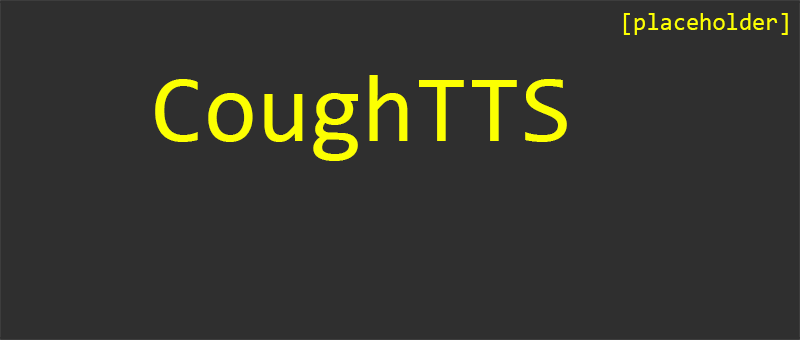
<style>
.page{position:relative;width:800px;height:340px;background:#2f2f2f}
.page>*{position:absolute;margin:0}
.t1{font:24px "Consolas";color:#fcff01}
.t2{font:96px "Consolas";color:#fcff01}
</style>
<div class="page">
<p class="t1" style="left:623px;top:13px;width:165px;height:22px">[placeholder]</p>
<p class="t2" style="left:155px;top:75px;width:412px;height:86px">CoughTTS</p>
</div>
